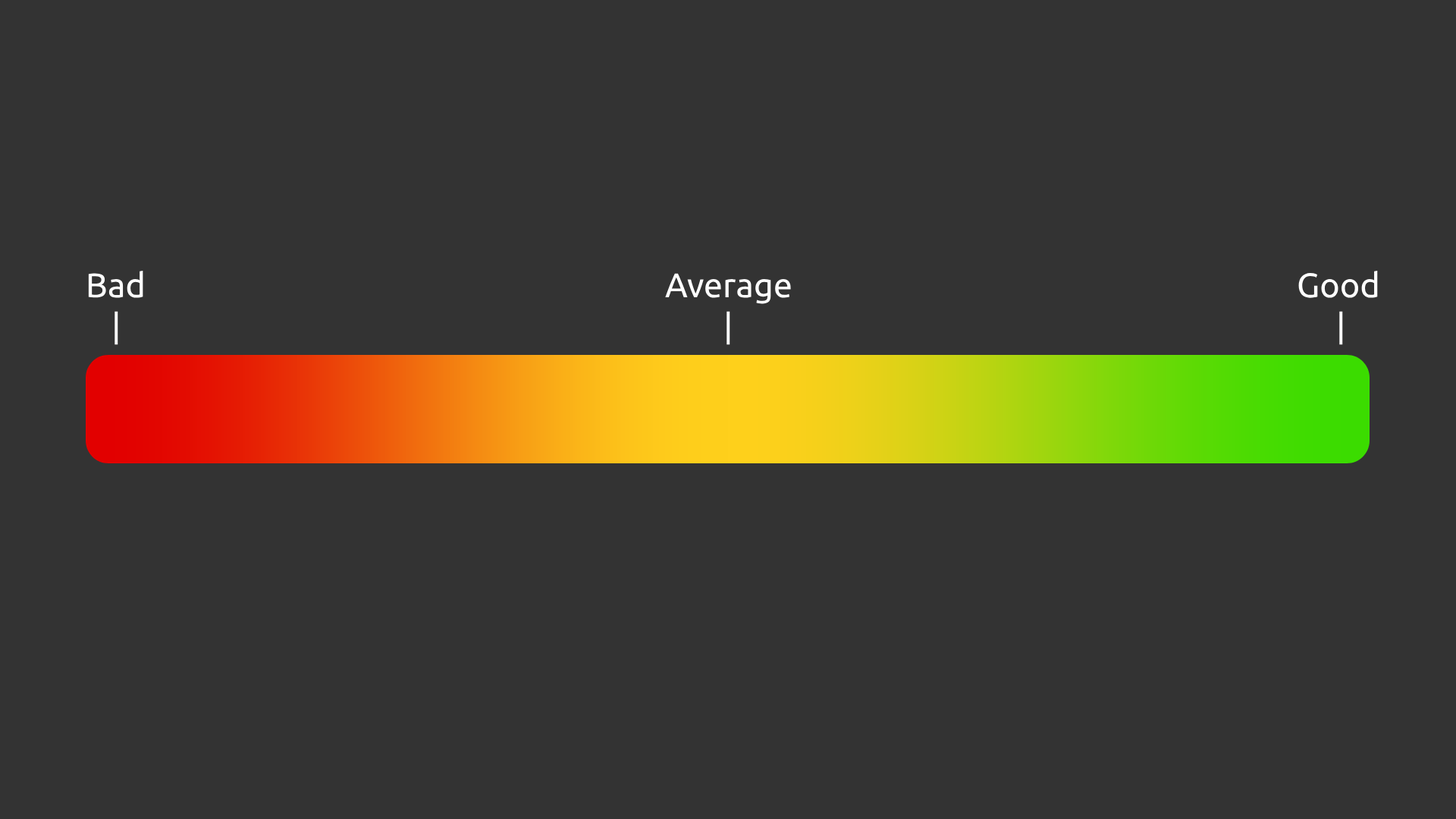
<style>
.page{position:relative;width:1456px;height:819px;background:#333333}
.page>*{position:absolute;margin:0}
.t1{font:34.1px "Ubuntu-Regular";color:#ffffff}
</style>
<div class="page">
<p class="t1" style="left:88px;top:271px;width:55px;height:27px">Bad</p>
<p class="t1" style="left:665px;top:273px;width:126px;height:31px">Average</p>
<p class="t1" style="left:1298px;top:271px;width:80px;height:27px">Good</p>
<p class="t1" style="left:115px;top:311px;width:3px;height:34px">|</p>
<p class="t1" style="left:726px;top:311px;width:4px;height:34px">|</p>
<p class="t1" style="left:1339px;top:311px;width:4px;height:34px">|</p>
</div>
